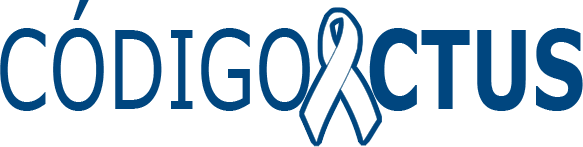
<style>
.page{position:relative;width:583px;height:147px;background:#ffffff}
.page>*{position:absolute;margin:0}
.t1{font:108.3px "Verdana";color:#00467f;scale:0.69 1}
.t2{font:108.3px "Verdana-Bold";color:#00467f;scale:0.69 1}
</style>
<div class="page">
<p class="t1" style="left:0px;top:0px;width:583px;height:111px">CÓDIGO<span class="t2">  CTUS</span></p>
</div>
